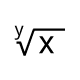
<style>
.page{position:relative;width:80px;height:80px;background:#ffffff}
.page>*{position:absolute;margin:0}
.t1{font:18px "DroidSans";color:#000000}
.t2{font:31.8px "DroidSans";color:#000000}
</style>
<div class="page">
<p class="t1" style="left:14px;top:25px;width:10px;height:15px">y</p>
<p class="t2" style="left:39px;top:36px;width:15px;height:18px">x</p>
</div>
